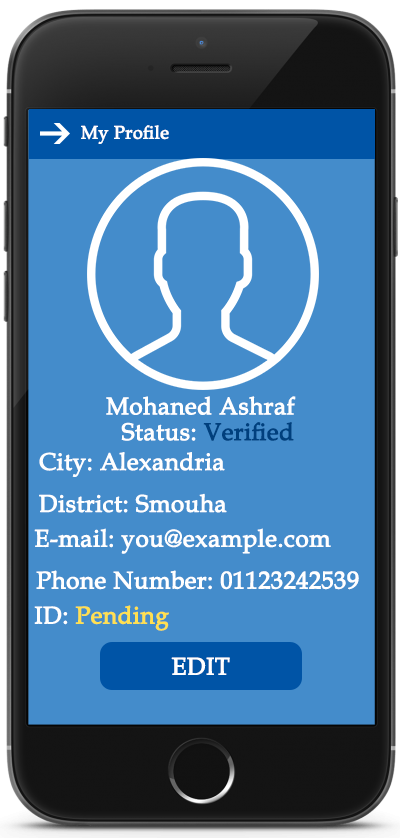
<style>
.page{position:relative;width:400px;height:838px;background:#448ccb}
.page>*{position:absolute;margin:0}
.t1{font:18px "BookAntiqua";color:#ffffff;font-weight:bold}
.t2{font:24px "BookAntiqua";color:#ffffff;font-weight:bold}
.t3{font:24px "BookAntiqua";color:#ffe050;font-weight:bold}
</style>
<div class="page">
<p class="t1" style="left:81px;top:125px;width:88px;height:19px">My Profile</p>
<p class="t2" style="left:106px;top:396px;width:190px;height:19px">Mohaned Ashraf</p>
<p class="t2" style="left:39px;top:452px;width:186px;height:25px">City: Alexandria</p>
<p class="t2" style="left:39px;top:493px;width:188px;height:20px">District: Smouha</p>
<p class="t2" style="left:34px;top:528px;width:297px;height:26px">E-mail: you@example.com</p>
<p class="t2" style="left:36px;top:570px;width:323px;height:20px">Phone Number: 01123242539</p>
<p class="t3" style="left:34px;top:605px;width:135px;height:26px"><span class="t2">ID: </span>Pending</p>
<p class="t2" style="left:171px;top:657px;width:59px;height:18px">EDIT</p>
</div>
